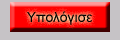
<style>
.page{position:relative;width:120px;height:40px;background:#c6c3c6}
.page>*{position:absolute;margin:0}
.t1{font:14px "ArialMT";color:#000000}
</style>
<div class="page">
<p class="t1" style="left:27px;top:11px;width:65px;height:14px">Υπολόγισε</p>
</div>
